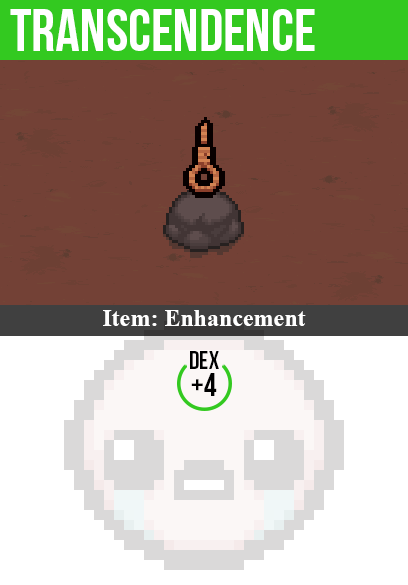
<style>
.page{position:relative;width:408px;height:585px;background:#734136}
.page>*{position:absolute;margin:0}
.t1{font:60px "BebasNeue";color:#ffffff}
.t2{font:24px "TimesNewRomanPS-BoldMT";color:#ffffff}
.t3{font:25px "BebasNeue";color:#000000}
.t4{font:32px "BebasNeue";color:#000000}
</style>
<div class="page">
<p class="t1" style="left:10px;top:9px;width:305px;height:42px">transcendence</p>
<p class="t2" style="left:103px;top:310px;width:203px;height:16px">Item: Enhancement</p>
<p class="t3" style="left:190px;top:351px;width:29px;height:18px">dex</p>
<p class="t4" style="left:191px;top:373px;width:26px;height:23px">+4</p>
</div>
